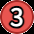
<style>
.page{position:relative;width:34px;height:34px;background:#e95550}
.page>*{position:absolute;margin:0}
.t1{font:24px "WebPSD-18463539-0-Regular";color:#ffffff;font-weight:bold}
</style>
<div class="page">
<p class="t1" style="left:2px;top:0px;width:30px;height:34px">3</p>
</div>
